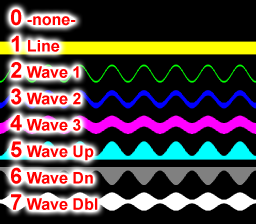
<style>
.page{position:relative;width:256px;height:224px;background:#000000}
.page>*{position:absolute;margin:0}
.t1{font:16px "Arial-BoldMT";color:#ff0000}
.t2{font:22px "Arial-BoldMT";color:#ff0000}
</style>
<div class="page">
<p class="t1" style="left:10px;top:9px;width:88px;height:201px"><span class="t2">0</span> -none-<br><span class="t2">1</span> Line<br><span class="t2">2</span> Wave 1<br><span class="t2">3</span> Wave 2<br><span class="t2">4</span> Wave 3<br><span class="t2">5</span> Wave Up<br><span class="t2">6</span> Wave Dn<br><span class="t2">7</span> Wave Dbl</p>
</div>
